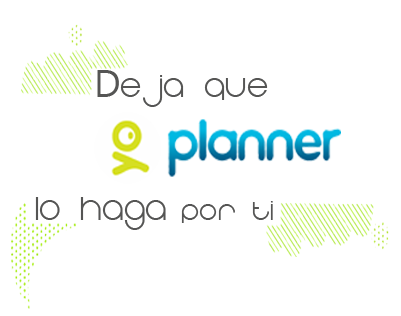
<style>
.page{position:relative;width:401px;height:316px;background:#ffffff}
.page>*{position:absolute;margin:0}
.t1{font:38.4px "EightOne";color:#555554}
.t2{font:38.4px "Gadugi";color:#555554}
.t3{font:38.9px "EightOne";color:#555554}
.t4{font:32.4px "EightOne";color:#555554}
</style>
<div class="page">
<p class="t1" style="left:97px;top:70px;width:171px;height:37px"><span class="t2">D</span>eja que</p>
<p class="t3" style="left:35px;top:197px;width:131px;height:33px">lo haga</p>
<p class="t4" style="left:181px;top:201px;width:92px;height:22px">Por ti</p>
</div>
